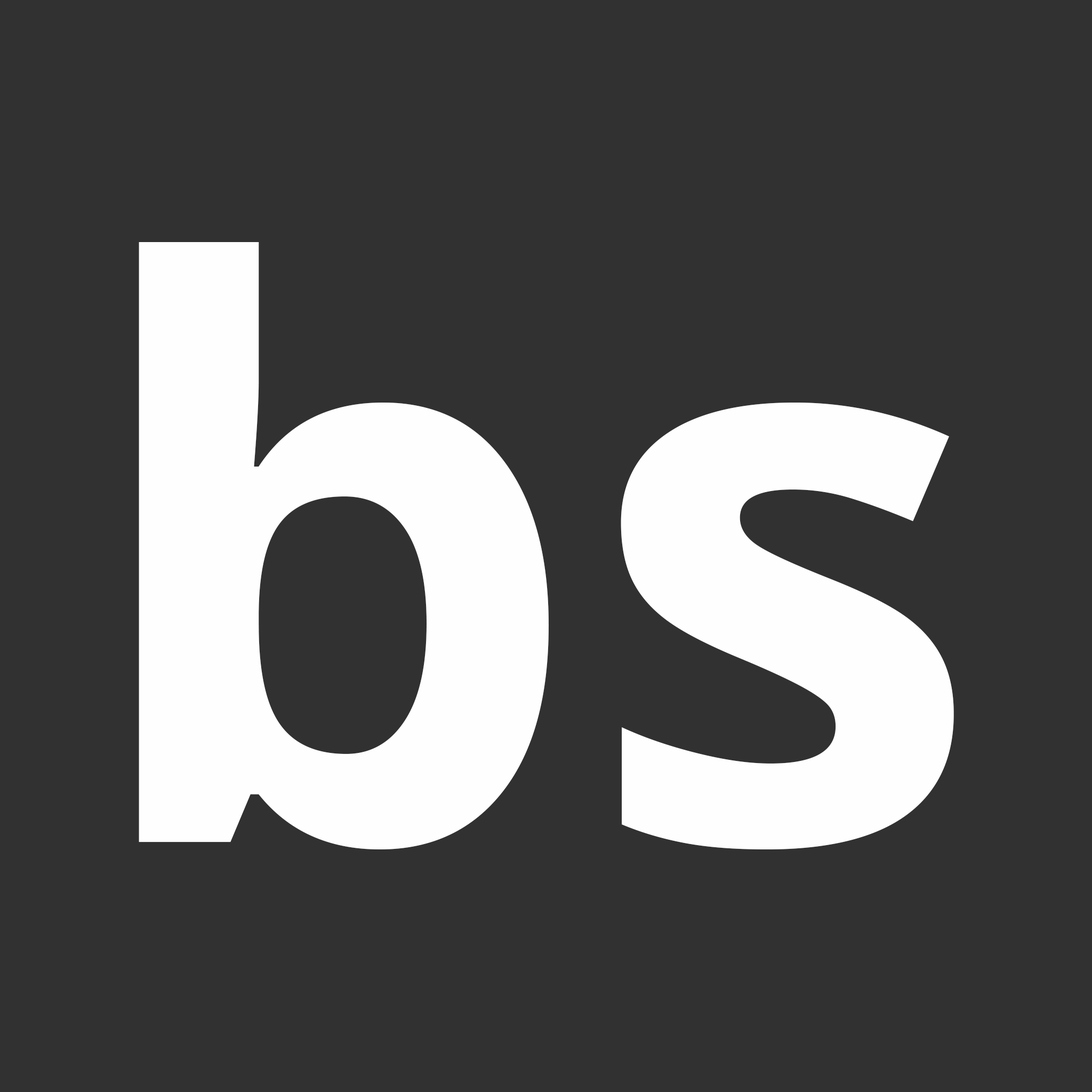
<style>
.page{position:relative;width:1092px;height:1092px;background:#313131}
.page>*{position:absolute;margin:0}
.t1{font:789.7px "OpenSans-Bold";color:#fefefe}
</style>
<div class="page">
<p class="t1" style="left:139px;top:242px;width:815px;height:607px">bs</p>
</div>
